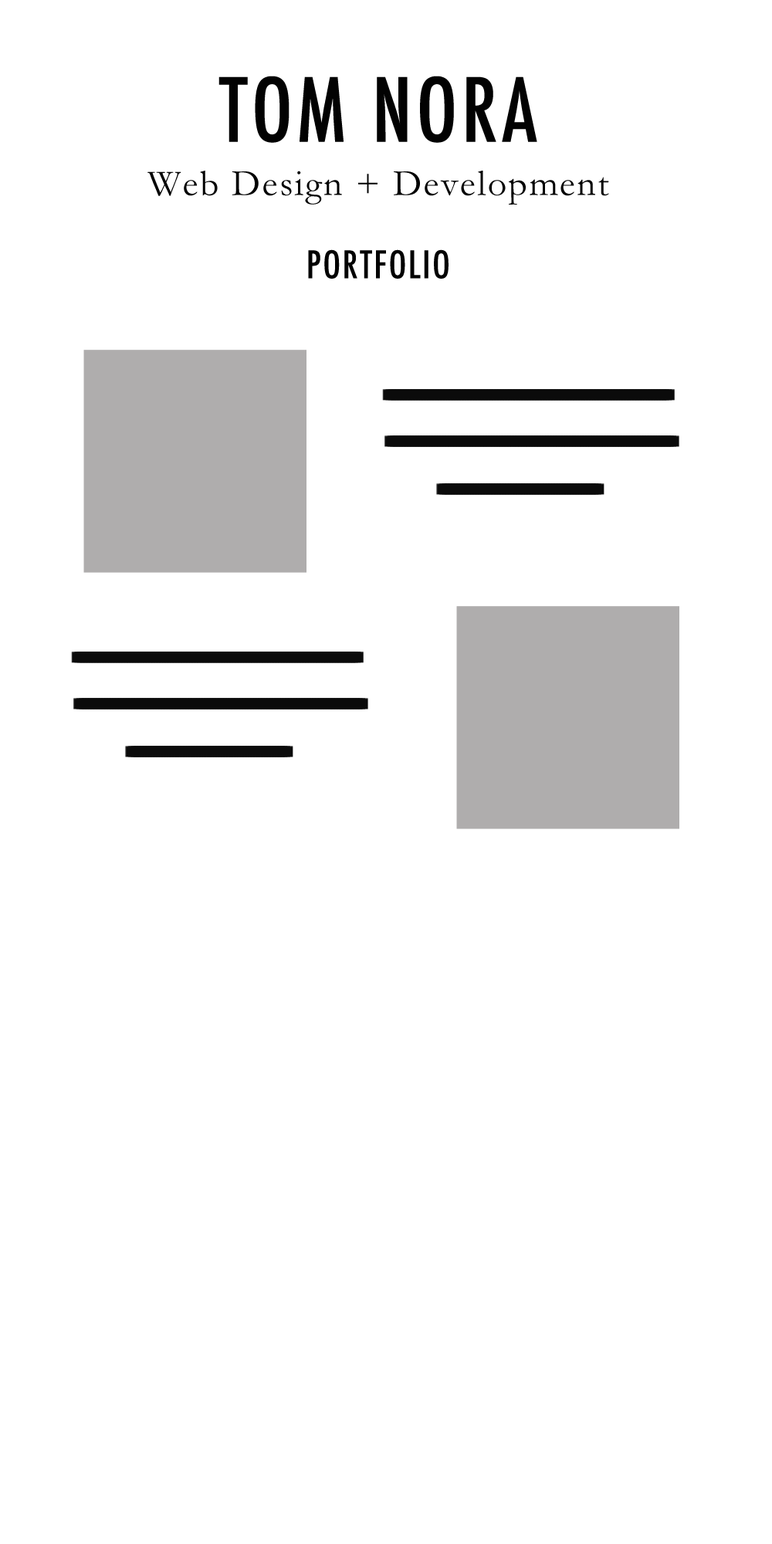
<style>
.page{position:relative;width:772px;height:1544px;background:#ffffff}
.page>*{position:absolute;margin:0}
.t1{font:37.1px/27.8px "Garamond";letter-spacing:0.05em;color:#020202}
.t2{font:85.7px/25.4px "Futura-CondensedMedium";letter-spacing:0.05em;color:#020202}
.t3{font:37.1px/27.8px "Futura-CondensedMedium";letter-spacing:0.05em;color:#020202}
</style>
<div class="page">
<p class="t1" style="left:147px;top:76px;width:462px;height:203px;text-align:center"><span class="t2">TOM NORA<br><br></span>Web Design + Development<br><br><br><span class="t3">PORTFOLIO</span></p>
</div>
